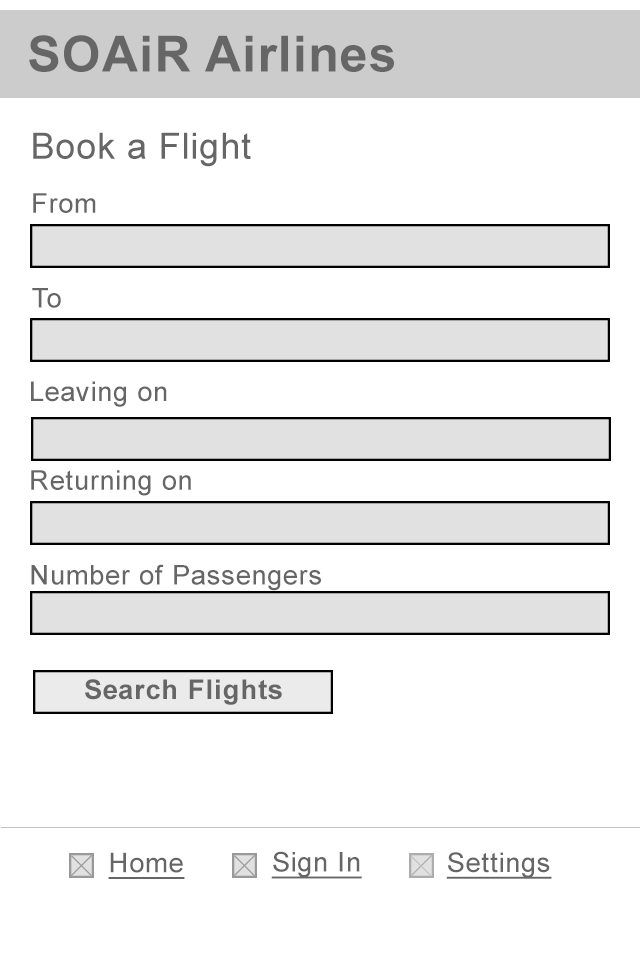
<style>
.page{position:relative;width:640px;height:960px;background:#ffffff}
.page>*{position:absolute;margin:0}
.t1{font:49.8px "Arial-BoldMT";letter-spacing:0.025em;color:#666666}
.t2{font:36.2px "ArialMT";letter-spacing:0.025em;color:#666666}
.t3{font:27.2px "ArialMT";letter-spacing:0.025em;color:#666666}
.t4{font:27.2px "Arial-BoldMT";letter-spacing:0.025em;color:#666666}
.t5{font:27.2px "ArialMT";letter-spacing:0.025em;color:#666666;text-decoration:underline}
</style>
<div class="page">
<p class="t1" style="left:29px;top:35px;width:365px;height:37px">SOAiR Airlines</p>
<p class="t2" style="left:33px;top:132px;width:218px;height:35px">Book a Flight</p>
<p class="t3" style="left:33px;top:193px;width:63px;height:20px">From</p>
<p class="t3" style="left:32px;top:288px;width:29px;height:20px">To</p>
<p class="t3" style="left:31px;top:381px;width:136px;height:26px">Leaving on</p>
<p class="t3" style="left:31px;top:470px;width:160px;height:26px">Returning on</p>
<p class="t3" style="left:31px;top:564px;width:290px;height:27px">Number of Passengers</p>
<p class="t4" style="left:85px;top:679px;width:197px;height:26px">Search Flights</p>
<p class="t5" style="left:108px;top:852px;width:77px;height:27px">Home</p>
<p class="t5" style="left:271px;top:851px;width:91px;height:28px">Sign In</p>
<p class="t5" style="left:446px;top:852px;width:106px;height:27px">Settings</p>
</div>
